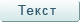
<style>
.page{position:relative;width:80px;height:22px}
.page>*{position:absolute;margin:0}
.t1{font:13px "ArialMT";letter-spacing:0.099em;color:#345a70}
</style>
<div class="page">
<p class="t1" style="left:18px;top:5px;width:38px;height:10px">Текст</p>
</div>
